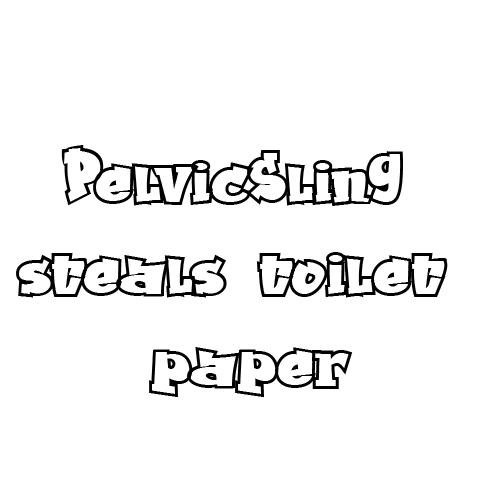
<style>
.page{position:relative;width:500px;height:500px;background:#ffffff}
.page>*{position:absolute;margin:0}
.t1{font:76.6px "Grafitty";letter-spacing:-0.02em;color:#000000}
</style>
<div class="page">
<p class="t1" style="left:16px;top:145px;width:432px;height:252px;text-align:center">PelvicSling <br>steals toilet <br>paper</p>
</div>
